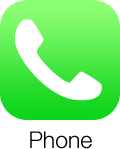
<style>
.page{position:relative;width:120px;height:149px;background:#ffffff}
.page>*{position:absolute;margin:0}
.t1{font:23px "HelveticaNeue-Light";color:#000000}
</style>
<div class="page">
<p class="t1" style="left:30px;top:131px;width:62px;height:18px">Phone</p>
</div>
